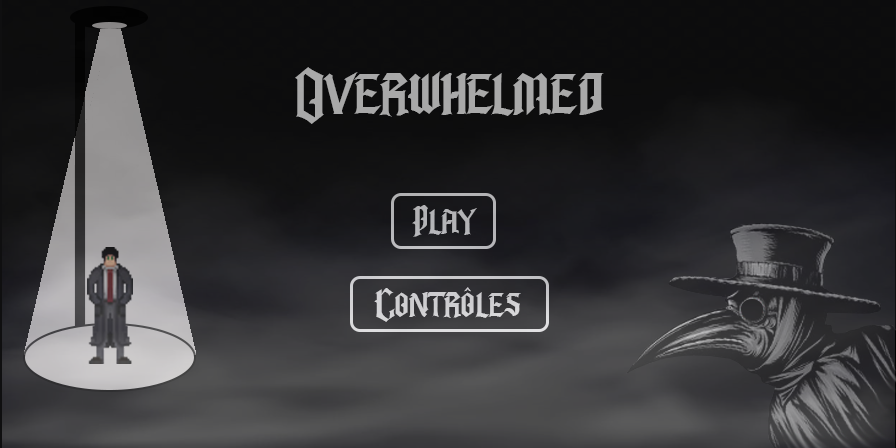
<style>
.page{position:relative;width:896px;height:448px}
.page>*{position:absolute;margin:0}
.t1{font:80.7px "Barbatos";color:#a9a9a9}
.t2{font:48px "Barbatos";color:#b3b3b6}
.t3{font:48px "Barbatos";color:#cfcfd1}
</style>
<div class="page">
<p class="t1" style="left:295px;top:67px;width:309px;height:57px">Overwhelmed</p>
<p class="t2" style="left:412px;top:205px;width:65px;height:32px">Play</p>
<p class="t3" style="left:374px;top:287px;width:147px;height:35px">Contrôles</p>
</div>
